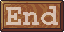
<style>
.page{position:relative;width:64px;height:32px;background:#8f5030}
.page>*{position:absolute;margin:0}
.t1{font:30px "Courier-Bold";color:#d8c2b0}
</style>
<div class="page">
<p class="t1" style="left:6px;top:6px;width:52px;height:19px">End</p>
</div>
